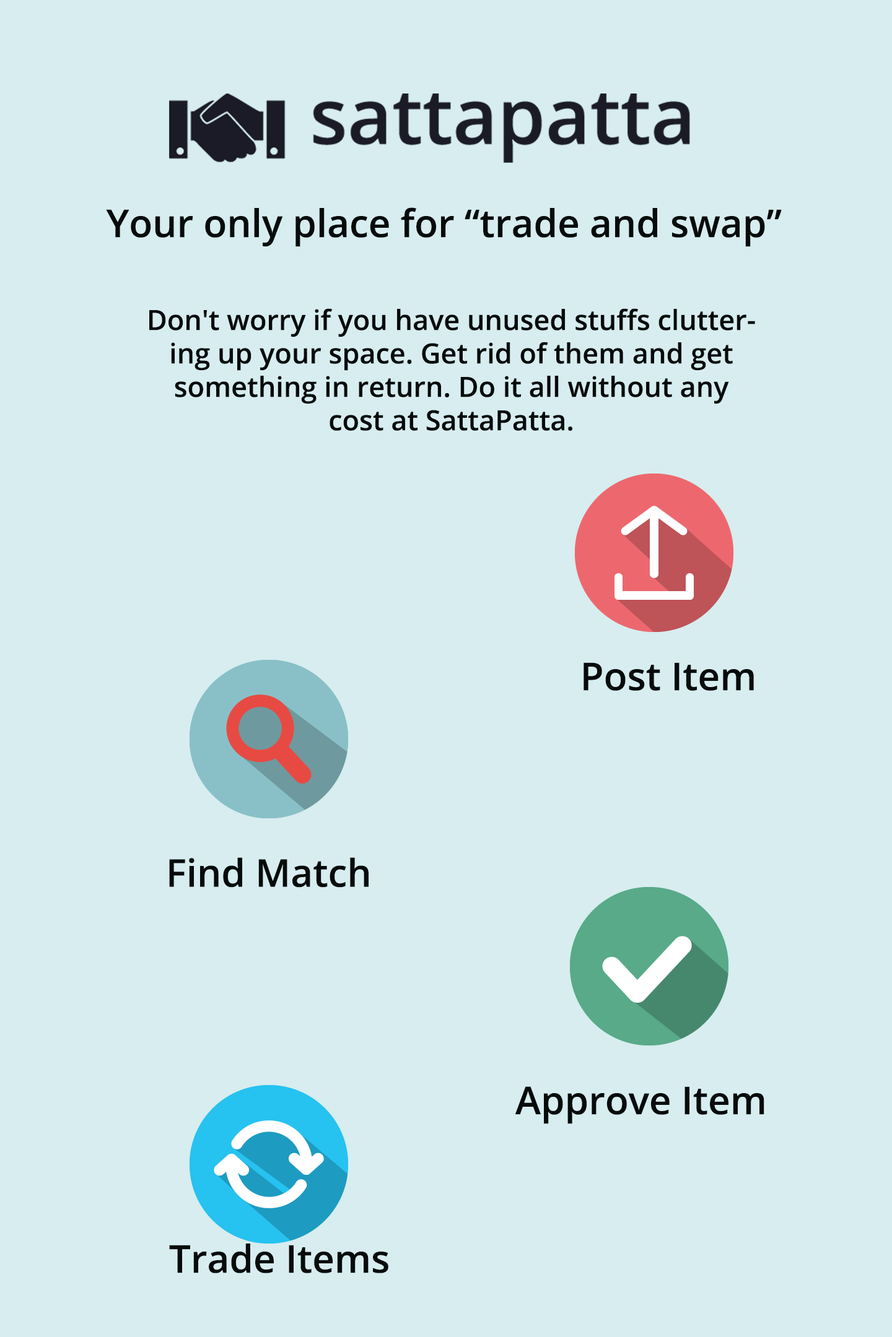
<style>
.page{position:relative;width:892px;height:1337px;background:#d7edef}
.page>*{position:absolute;margin:0}
.t1{font:38.4px "OpenSans-Semibold";color:#070b0b}
.t2{font:27.9px "OpenSans-Semibold";color:#070b0b}
</style>
<div class="page">
<p class="t1" style="left:106px;top:207px;width:675px;height:40px">Your only place for “trade and swap”</p>
<p class="t2" style="left:149px;top:308px;width:606px;height:123px;text-align:center">Don't worry if you have unused stuffs cluttering up your space. Get rid of them and get something in return. Do it all without any cost at SattaPatta.</p>
<p class="t1" style="left:583px;top:663px;width:171px;height:28px">Post Item</p>
<p class="t1" style="left:169px;top:858px;width:199px;height:30px">Find Match</p>
<p class="t1" style="left:515px;top:1087px;width:249px;height:37px">Approve Item</p>
<p class="t1" style="left:169px;top:1244px;width:219px;height:30px">Trade Items</p>
</div>
